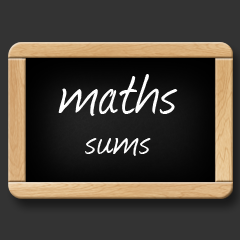
<style>
.page{position:relative;width:240px;height:240px;background:#333333}
.page>*{position:absolute;margin:0}
.t1{font:74.5px "Journal";letter-spacing:0.025em;color:#fdfdfd}
.t2{font:48px "Journal";letter-spacing:0.025em;color:#fdfdfd}
</style>
<div class="page">
<p class="t1" style="left:58px;top:74px;width:120px;height:42px">maths</p>
<p class="t2" style="left:85px;top:138px;width:66px;height:18px">sums</p>
</div>
